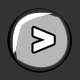
<style>
.page{position:relative;width:80px;height:80px;background:#333333}
.page>*{position:absolute;margin:0}
.t1{font:42px "MEgalopolisExtra";letter-spacing:-0.05em;color:#fcfcfc}
</style>
<div class="page">
<p class="t1" style="left:33px;top:27px;width:21px;height:25px">&gt;</p>
</div>
